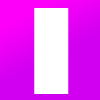
<style>
.page{position:relative;width:100px;height:100px;background:#ffffff}
.page>*{position:absolute;margin:0}
.t1{font:112px "CharcoalCY";letter-spacing:0.18em;color:#ffffff;scale:1.79 1}
</style>
<div class="page">
<p class="t1" style="left:34px;top:8px;width:35px;height:86px">I</p>
</div>
